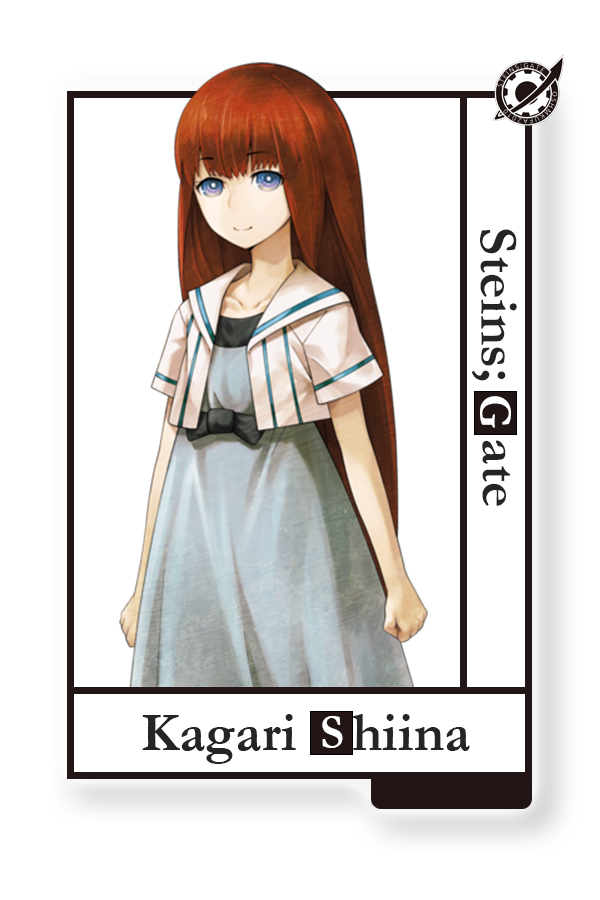
<style>
.page{position:relative;width:600px;height:900px;background:#ffffff}
.page>*{position:absolute;margin:0}
.t1{font:55.4px "Garamond-Bold";color:#252525}
.t2{font:47px "Garamond-Bold";color:#ffffff}
</style>
<div class="page">
<p class="t1" style="left:472px;top:229px;width:45px;height:277px;rotate:89deg">Steins;    ate</p>
<p class="t2" style="left:480px;top:396px;width:31px;height:32px;rotate:90deg">G</p>
<p class="t1" style="left:142px;top:714px;width:328px;height:50px">Kagari    hiina</p>
<p class="t2" style="left:322px;top:716px;width:21px;height:32px">S</p>
</div>
